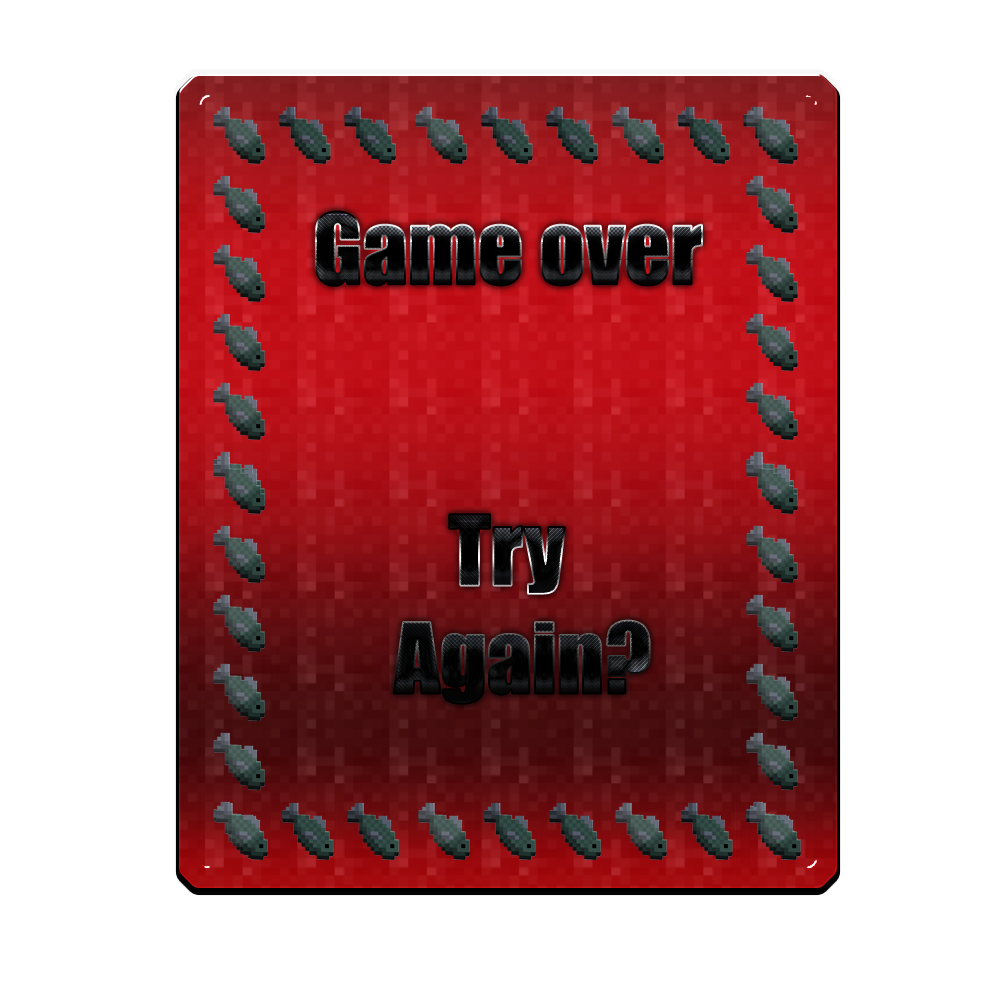
<style>
.page{position:relative;width:1000px;height:1000px;background:#ffffff}
.page>*{position:absolute;margin:0}
.t1{font:90px "Impact"}
.t2{font:90px "Impact";color:#080808}
</style>
<div class="page">
<p class="t1" style="left:316px;top:211px;width:386px;height:75px">Game over</p>
<p class="t2" style="left:393px;top:514px;width:257px;height:190px;text-align:center">Try<br>  Again?</p>
</div>
